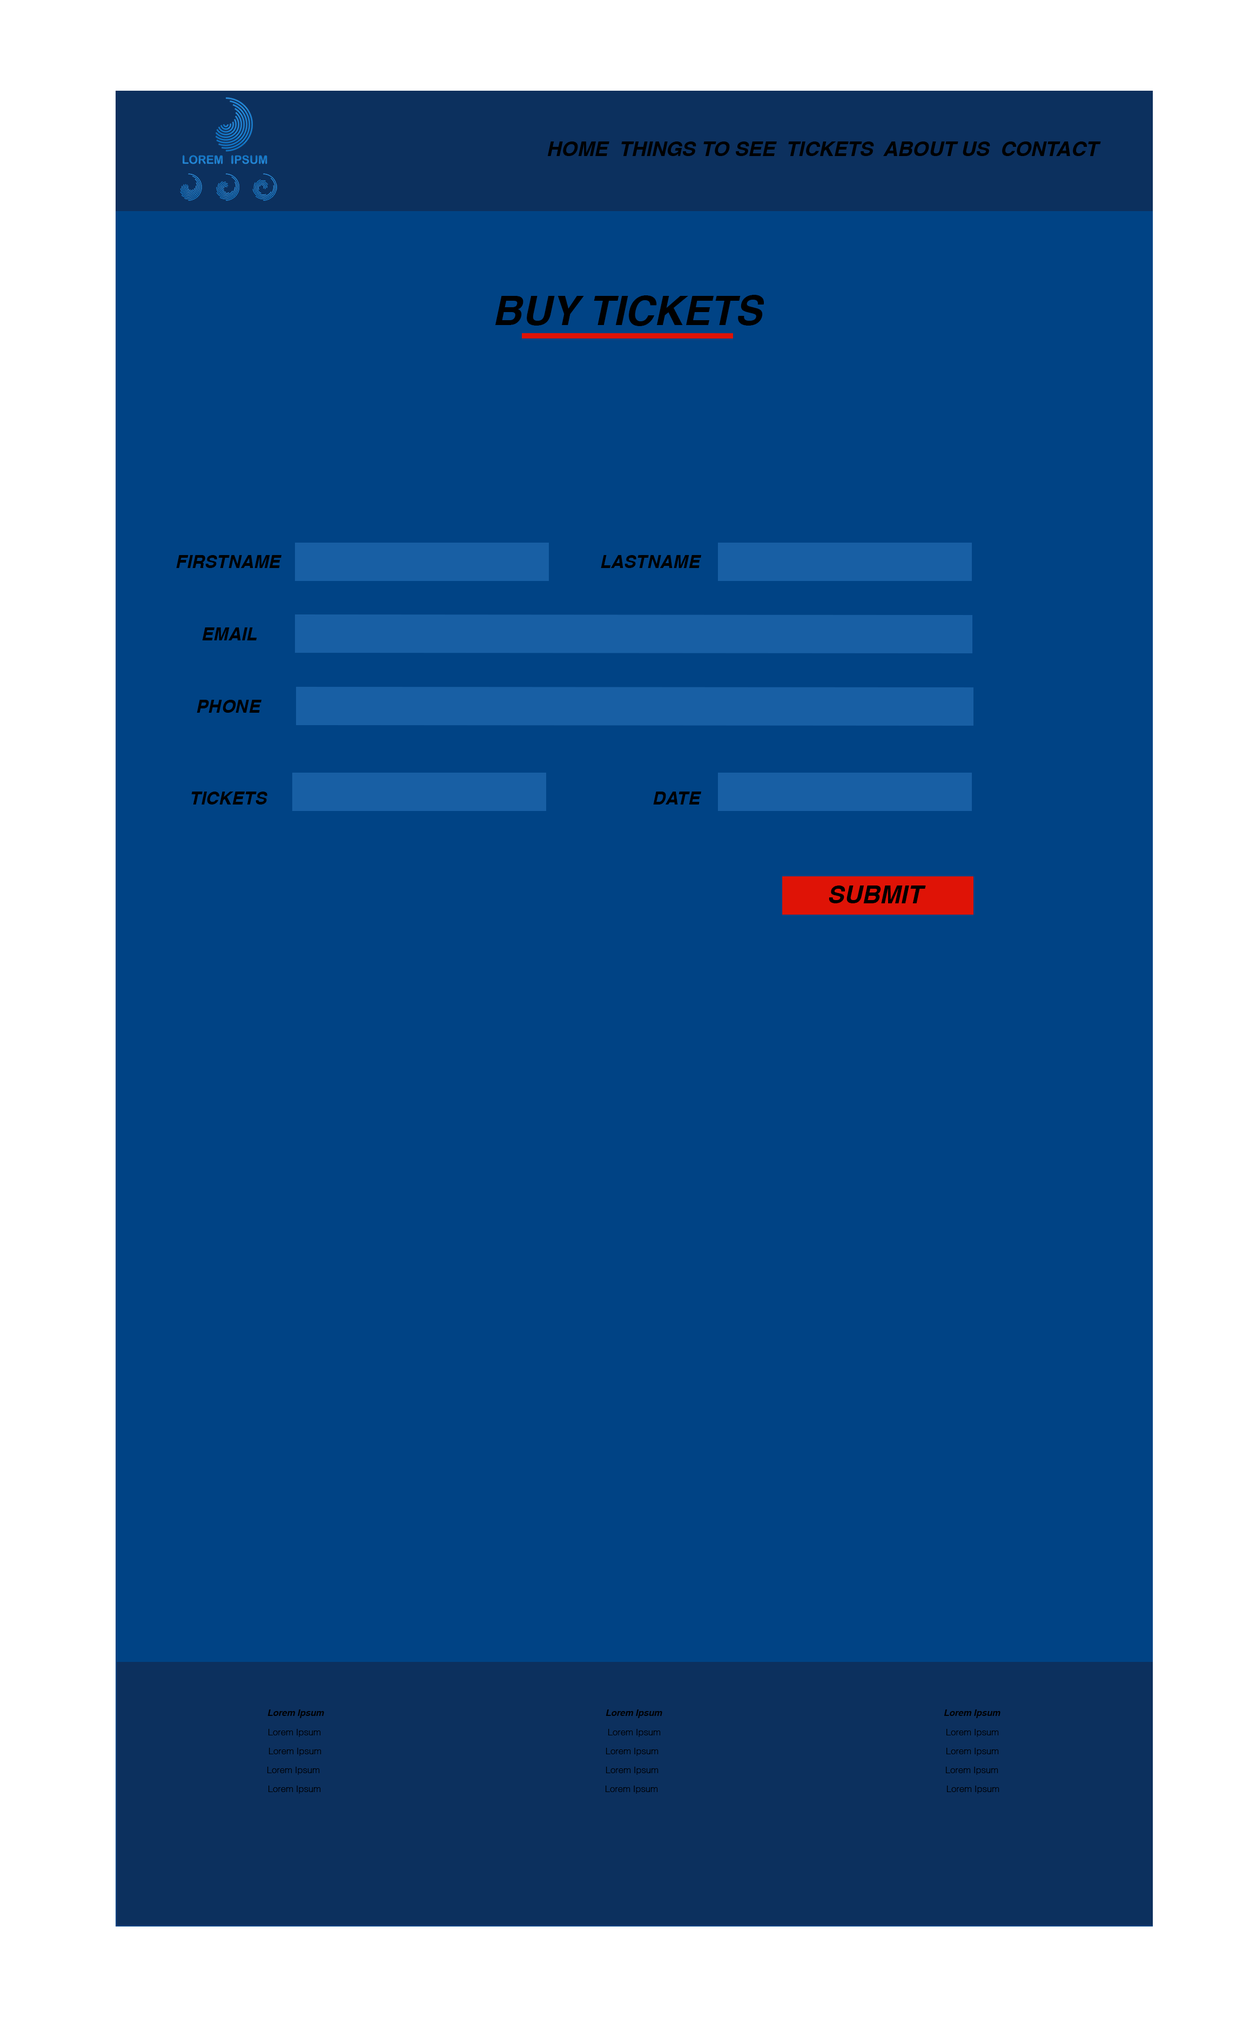
<style>
.page{position:relative;width:1236px;height:2028px;background:#004385}
.page>*{position:absolute;margin:0}
.t1{font:20.2px "Helvetica-BoldOblique";color:#000000}
.t2{font:40.5px "Helvetica-BoldOblique";color:#000000}
.t3{font:18px "Helvetica-BoldOblique";color:#000000}
.t4{font:24.7px "Helvetica-BoldOblique";color:#000000}
.t5{font:9px "Helvetica-BoldOblique";color:#000000}
.t6{font:9px "Helvetica-Light";color:#000000}
</style>
<div class="page">
<p class="t1" style="left:547px;top:141px;width:554px;height:15px">HOME  THINGS TO SEE  TICKETS  ABOUT US  CONTACT</p>
<p class="t2" style="left:495px;top:295px;width:269px;height:31px">BUY TICKETS</p>
<p class="t3" style="left:176px;top:555px;width:106px;height:13px">FIRSTNAME</p>
<p class="t3" style="left:600px;top:555px;width:101px;height:13px">LASTNAME</p>
<p class="t3" style="left:202px;top:627px;width:55px;height:13px">EMAIL</p>
<p class="t3" style="left:197px;top:700px;width:65px;height:13px">PHONE</p>
<p class="t3" style="left:191px;top:792px;width:76px;height:13px">TICKETS</p>
<p class="t3" style="left:653px;top:792px;width:48px;height:13px">DATE</p>
<p class="t4" style="left:828px;top:886px;width:98px;height:17px">SUBMIT</p>
<p class="t5" style="left:267px;top:1710px;width:57px;height:8px">Lorem Ipsum</p>
<p class="t5" style="left:605px;top:1710px;width:57px;height:8px">Lorem Ipsum</p>
<p class="t5" style="left:943px;top:1710px;width:57px;height:8px">Lorem Ipsum</p>
<p class="t6" style="left:268px;top:1729px;width:53px;height:8px">Lorem Ipsum</p>
<p class="t6" style="left:608px;top:1729px;width:52px;height:8px">Lorem Ipsum</p>
<p class="t6" style="left:946px;top:1729px;width:52px;height:8px">Lorem Ipsum</p>
<p class="t6" style="left:269px;top:1748px;width:52px;height:8px">Lorem Ipsum</p>
<p class="t6" style="left:606px;top:1748px;width:52px;height:8px">Lorem Ipsum</p>
<p class="t6" style="left:946px;top:1748px;width:52px;height:8px">Lorem Ipsum</p>
<p class="t6" style="left:267px;top:1767px;width:53px;height:8px">Lorem Ipsum</p>
<p class="t6" style="left:606px;top:1767px;width:52px;height:8px">Lorem Ipsum</p>
<p class="t6" style="left:946px;top:1767px;width:52px;height:8px">Lorem Ipsum</p>
<p class="t6" style="left:268px;top:1786px;width:53px;height:8px">Lorem Ipsum</p>
<p class="t6" style="left:605px;top:1786px;width:53px;height:8px">Lorem Ipsum</p>
<p class="t6" style="left:947px;top:1786px;width:52px;height:8px">Lorem Ipsum</p>
</div>
